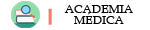
<style>
.page{position:relative;width:150px;height:30px;background:#ffffff}
.page>*{position:absolute;margin:0}
.t1{font:12px/11px "BookAntiqua";color:#000000}
</style>
<div class="page">
<p class="t1" style="left:64px;top:5px;width:69px;height:19px;text-align:center">ACADEMIA<br>MÉDICA</p>
</div>
